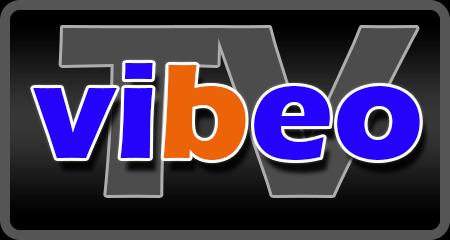
<style>
.page{position:relative;width:450px;height:240px}
.page>*{position:absolute;margin:0}
.t1{font:140px "ErasITC-Bold";color:#2502fa}
.t2{font:140px "ErasITC-Bold";color:#ed6408}
</style>
<div class="page">
<p class="t1" style="left:33px;top:63px;width:387px;height:97px">vi<span class="t2">b</span>eo</p>
</div>
